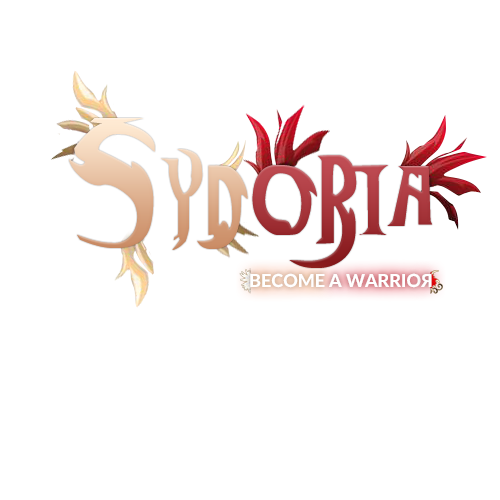
<style>
.page{position:relative;width:500px;height:500px;background:#ffffff}
.page>*{position:absolute;margin:0}
.t1{font:140px "ThunderCats-Ho!"}
.t2{font:160px "ThunderCats-Ho!"}
.t3{font:140px "ThunderCats-Ho!";color:#ab3b41}
.t4{font:18px "Lato-Heavy";color:#ffffff;text-transform:uppercase}
</style>
<div class="page">
<p class="t1" style="left:69px;top:118px;width:179px;height:132px"><span class="t2">S</span>yd</p>
<p class="t3" style="left:252px;top:155px;width:181px;height:113px">oria</p>
<p class="t4" style="left:250px;top:273px;width:75px;height:15px">Become</p>
<p class="t4" style="left:329px;top:273px;width:92px;height:15px">a warrio</p>
<p class="t4" style="left:421px;top:274px;width:11px;height:13px;rotate:180deg">R</p>
</div>
